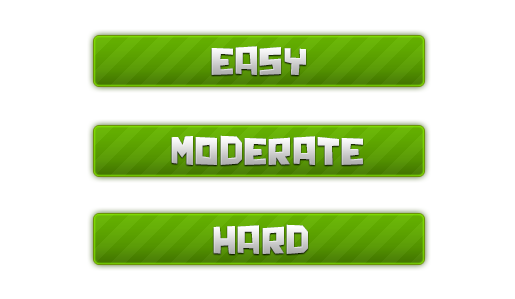
<style>
.page{position:relative;width:515px;height:299px;background:#ffffff}
.page>*{position:absolute;margin:0}
.t1{font:40px "Chunq";letter-spacing:0.04em}
</style>
<div class="page">
<p class="t1" style="left:211px;top:46px;width:95px;height:29px">EASY</p>
<p class="t1" style="left:171px;top:135px;width:192px;height:30px">moderate</p>
<p class="t1" style="left:213px;top:224px;width:95px;height:30px">HARD</p>
</div>
